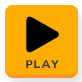
<style>
.page{position:relative;width:82px;height:82px;background:#ffae00}
.page>*{position:absolute;margin:0}
.t1{font:10.9px "Couture-Bold";letter-spacing:0.075em;color:#333333}
</style>
<div class="page">
<p class="t1" style="left:26px;top:60px;width:33px;height:8px">play</p>
</div>
